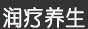
<style>
.page{position:relative;width:88px;height:29px;background:#333333}
.page>*{position:absolute;margin:0}
.t1{font:21.6px "STYuanti-SC-Regular";letter-spacing:0.05em;color:#faf7f7;font-weight:bold;scale:0.9 1}
</style>
<div class="page">
<p class="t1" style="left:3px;top:7px;width:82px;height:21px">润疗养生</p>
</div>
